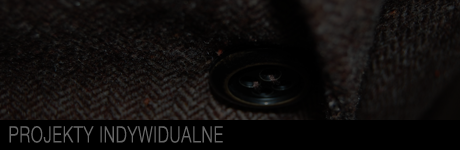
<style>
.page{position:relative;width:460px;height:150px}
.page>*{position:absolute;margin:0}
.t1{font:22.4px "HelveticaNeueCE-Light";letter-spacing:0.05em;color:#666666;scale:0.71 1}
</style>
<div class="page">
<p class="t1" style="left:9px;top:126px;width:214px;height:17px">PROJEKTY INDYWIDUALNE</p>
</div>
